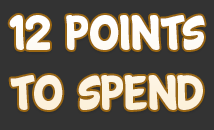
<style>
.page{position:relative;width:214px;height:130px;background:#333333}
.page>*{position:absolute;margin:0}
.t1{font:50px "Cartwheel";color:#fefaf3}
</style>
<div class="page">
<p class="t1" style="left:9px;top:15px;width:196px;height:95px;text-align:center">12 points<br>to spend</p>
</div>
